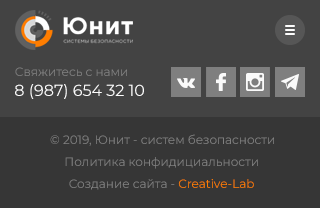
<style>
.page{position:relative;width:320px;height:208px;background:#434343}
.page>*{position:absolute;margin:0}
.t1{font:12px "Montserrat-Regular";color:#808080}
.t2{font:16px "Montserrat-Regular";color:#fcfcfc}
.t3{font:12px "Montserrat-Regular";color:#ff7d00}
</style>
<div class="page">
<p class="t1" style="left:15px;top:67px;width:112px;height:9px">Свяжитесь с нами</p>
<p class="t2" style="left:15px;top:84px;width:129px;height:15px">8 (987) 654 32 10</p>
<p class="t1" style="left:50px;top:134px;width:224px;height:12px">© 2019, Юнит - систем безопасности</p>
<p class="t1" style="left:65px;top:157px;width:193px;height:12px">Политика конфидициальности</p>
<p class="t1" style="left:69px;top:179px;width:185px;height:11px">Создание сайта - <span class="t3">Creative-Lab</span></p>
</div>
